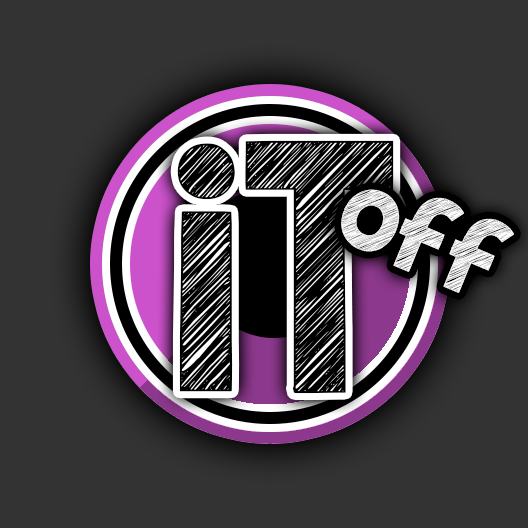
<style>
.page{position:relative;width:528px;height:528px;background:#333333}
.page>*{position:absolute;margin:0}
.t1{font:280px "KGBlankSpaceSketch";color:#000000}
.t2{font:90px "KGBlankSpaceSketch";color:#ffffff}
</style>
<div class="page">
<p class="t1" style="left:177px;top:140px;width:217px;height:254px">iT</p>
<p class="t2" style="left:341px;top:189px;width:173px;height:104px;rotate:23deg">off</p>
</div>
